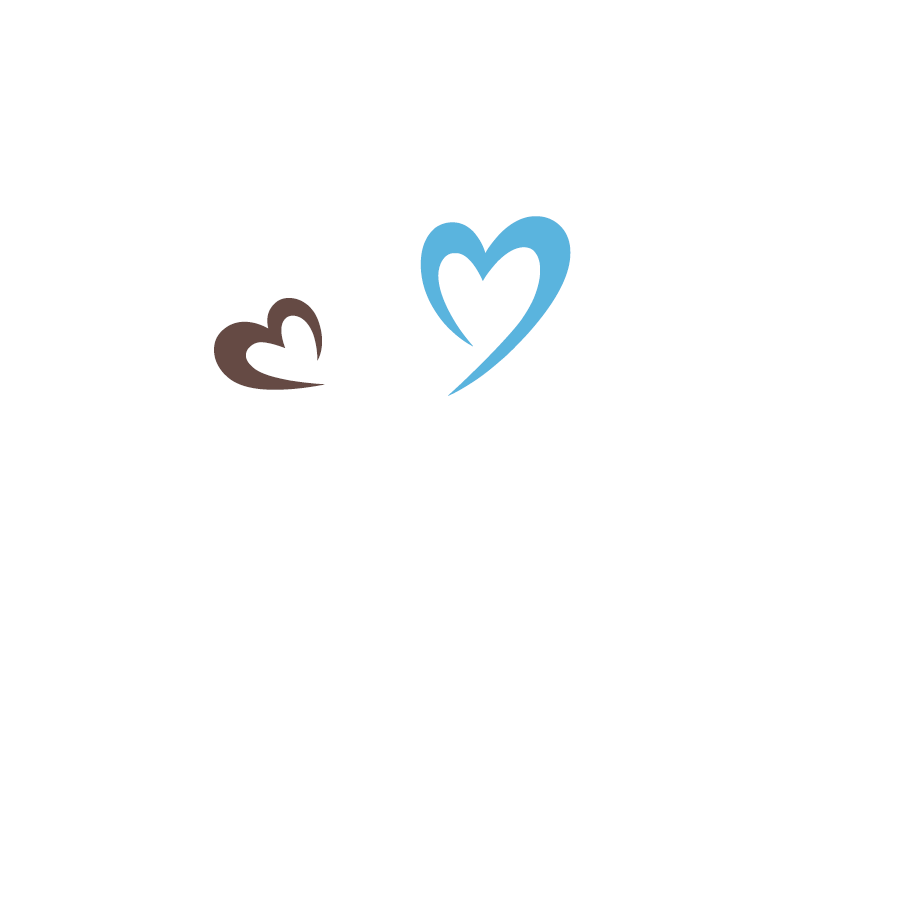
<style>
.page{position:relative;width:900px;height:900px;background:#ffffff}
.page>*{position:absolute;margin:0}
.t1{font:291.7px "fotograami-hearts01";letter-spacing:0.005em;color:#5ab4de}
.t2{font:137.5px "fotograami-hearts01";letter-spacing:0.005em;color:#654a44}
</style>
<div class="page">
<p class="t1" style="left:420px;top:216px;width:151px;height:180px">Y</p>
<p class="t2" style="left:214px;top:298px;width:111px;height:92px">W</p>
</div>
